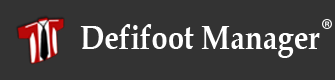
<style>
.page{position:relative;width:335px;height:80px;background:#333333}
.page>*{position:absolute;margin:0}
.t1{font:33.9px "BookAntiqua-Bold";color:#ffffff;scale:0.86 1}
</style>
<div class="page">
<p class="t1" style="left:80px;top:24px;width:240px;height:34px">Defifoot Manager</p>
</div>
